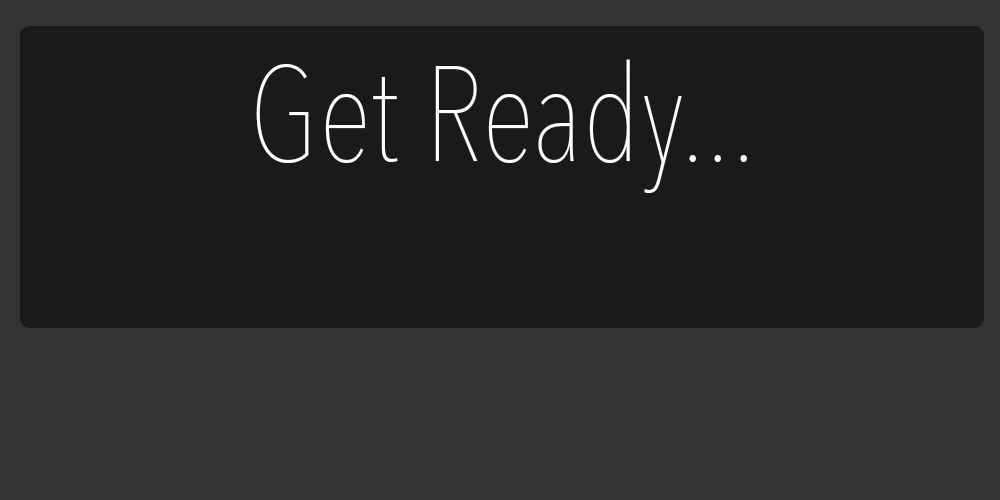
<style>
.page{position:relative;width:1000px;height:500px;background:#1a1a1a}
.page>*{position:absolute;margin:0}
.t1{font:133.7px "AvenirNextCondensed-UltraLight";color:#fffefe}
</style>
<div class="page">
<p class="t1" style="left:256px;top:59px;width:491px;height:134px">Get Ready...</p>
</div>
